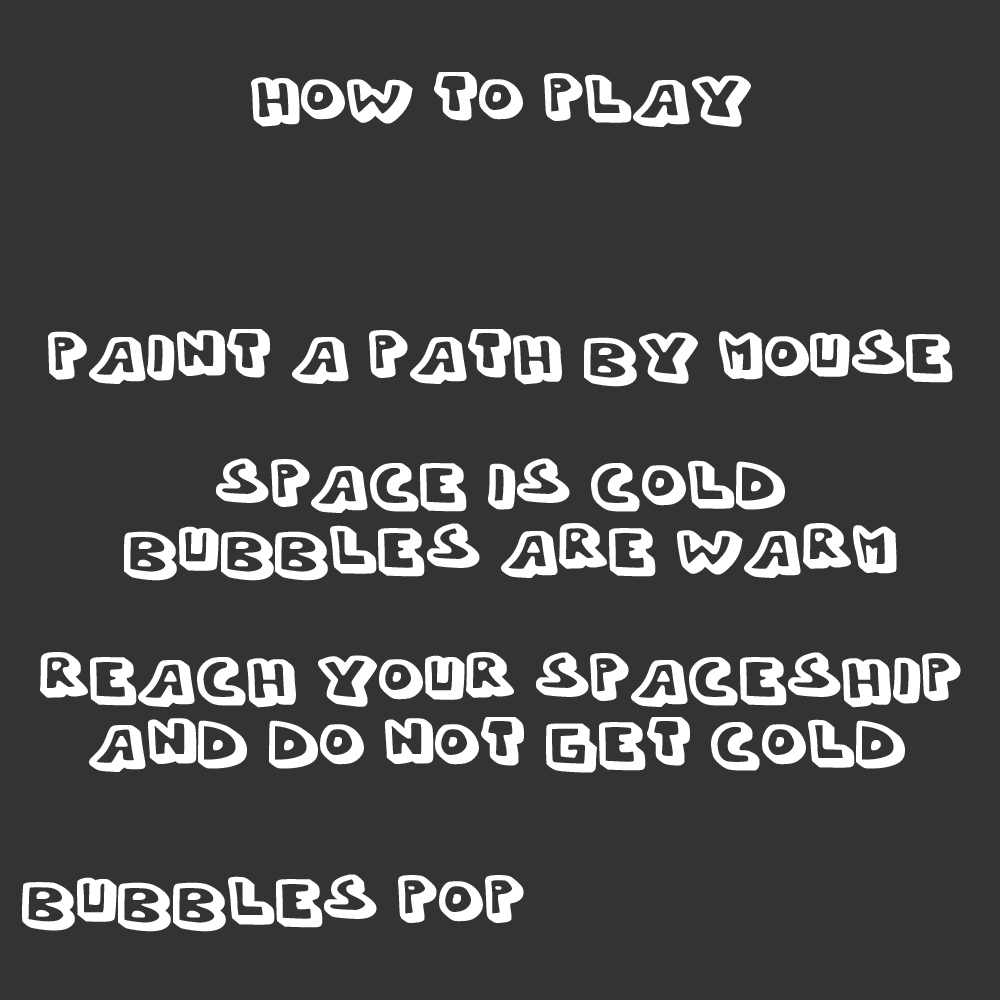
<style>
.page{position:relative;width:1000px;height:1000px;background:#333333}
.page>*{position:absolute;margin:0}
.t1{font:66.7px "Whypo";color:#ffffff;font-weight:bold;scale:1.08 1}
.t2{font:66.7px/54.2px "Whypo";color:#ffffff;font-weight:bold;scale:1.08 1}
</style>
<div class="page">
<p class="t1" style="left:251px;top:72px;width:500px;height:55px">How to play</p>
<p class="t2" style="left:40px;top:329px;width:921px;height:444px;text-align:center">Paint a path by mouse<br><br>space is cold<br> bubbles are warm<br><br>reach your spaceship<br>and do not get cold.</p>
<p class="t1" style="left:22px;top:874px;width:502px;height:58px">Bubbles pop</p>
</div>
